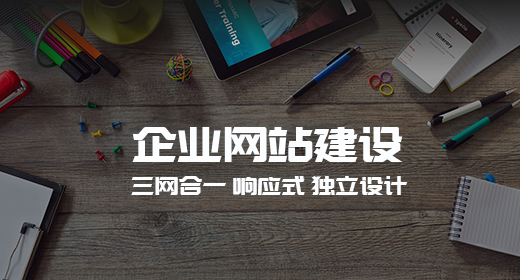
<style>
.page{position:relative;width:520px;height:280px}
.page>*{position:absolute;margin:0}
.t1{font:45.3px "MFLingHei_Noncommercial-Regular";color:#fbfdff}
.t2{font:24.1px "MFLingHei_Noncommercial-Regular";color:#fbfdff}
</style>
<div class="page">
<p class="t1" style="left:132px;top:127px;width:271px;height:35px">企业网站建设</p>
<p class="t2" style="left:131px;top:176px;width:277px;height:19px">三网合一 响应式 独立设计</p>
</div>
